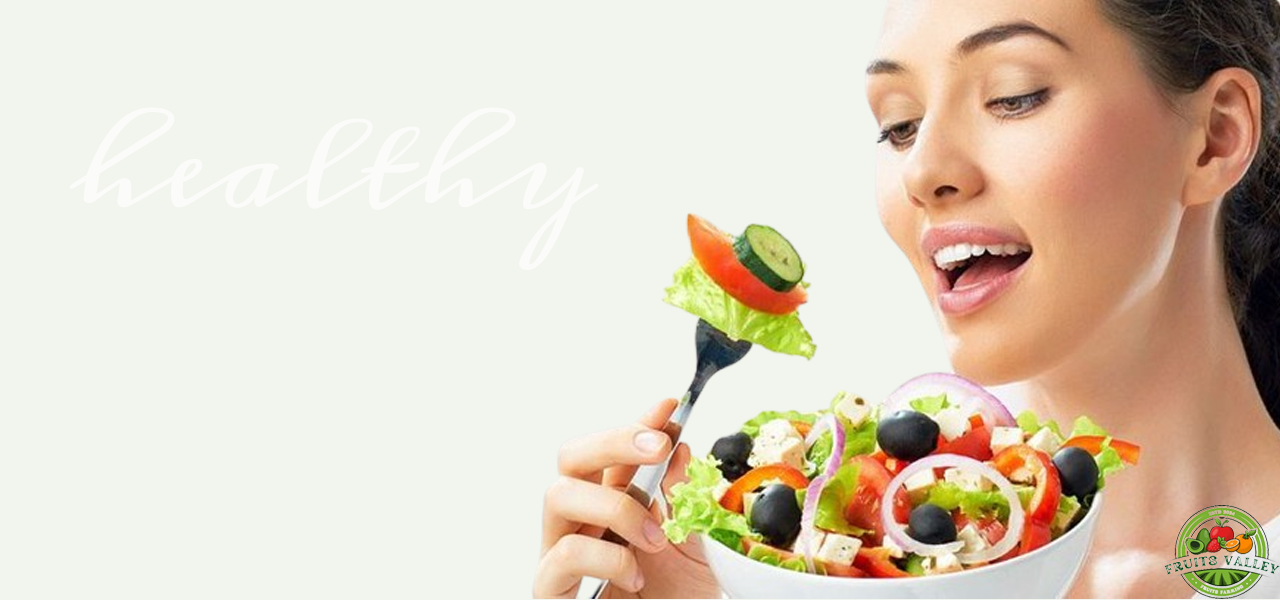
<style>
.page{position:relative;width:1280px;height:600px;background:#f2f5ed}
.page>*{position:absolute;margin:0}
.t1{font:112px "Meddon";color:#ffffff}
</style>
<div class="page">
<p class="t1" style="left:69px;top:107px;width:530px;height:163px;opacity:0.71">healthy</p>
</div>
